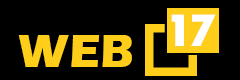
<style>
.page{position:relative;width:240px;height:80px;background:#000000}
.page>*{position:absolute;margin:0}
.t1{font:48px "ErasITC-Bold";color:#fece1a}
</style>
<div class="page">
<p class="t1" style="left:18px;top:35px;width:114px;height:32px">WEB</p>
</div>
